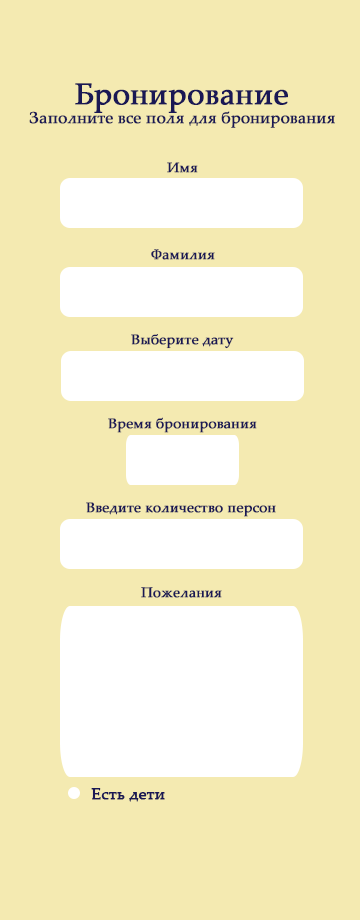
<style>
.page{position:relative;width:360px;height:920px;background:#f4eab1}
.page>*{position:absolute;margin:0}
.t1{font:16.1px "PalatinoLinotype-Roman";color:#1a1855;font-weight:bold}
.t2{font:30.2px "PalatinoLinotype-Roman";color:#1a1855;font-weight:bold}
.t3{font:13.9px "PalatinoLinotype-Roman";color:#1a1855;font-weight:bold}
.t4{font:13.8px "PalatinoLinotype-Roman";color:#1a1855;font-weight:bold}
.t5{font:16px "PalatinoLinotype-Roman";color:#1a1855;font-weight:bold}
</style>
<div class="page">
<p class="t1" style="left:29px;top:83px;width:306px;height:45px"><span class="t2">      Бронирование<br></span> Заполните все поля для бронирования</p>
<p class="t3" style="left:167px;top:162px;width:31px;height:11px">Имя</p>
<p class="t3" style="left:151px;top:249px;width:64px;height:11px">Фамилия</p>
<p class="t4" style="left:131px;top:334px;width:103px;height:15px">Выберите дату</p>
<p class="t3" style="left:108px;top:417px;width:149px;height:16px">Время бронирования</p>
<p class="t3" style="left:86px;top:502px;width:190px;height:15px">Введите количество персон</p>
<p class="t3" style="left:141px;top:587px;width:81px;height:11px">Пожелания</p>
<p class="t5" style="left:91px;top:788px;width:74px;height:14px">Есть дети</p>
</div>
